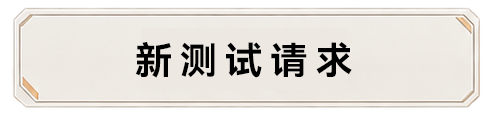
<style>
.page{position:relative;width:488px;height:121px}
.page>*{position:absolute;margin:0}
.t1{font:37.5px "HarmonyOS_Sans_SC_Bold";letter-spacing:0.2em;color:#000000}
</style>
<div class="page">
<p class="t1" style="left:135px;top:42px;width:217px;height:36px">新测试请求</p>
</div>
